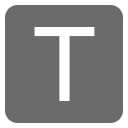
<style>
.page{position:relative;width:128px;height:128px;background:#6b6b6b}
.page>*{position:absolute;margin:0}
.t1{font:102.4px "Helvetica";color:#ffffff}
</style>
<div class="page">
<p class="t1" style="left:34px;top:27px;width:61px;height:74px">T</p>
</div>
